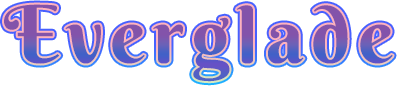
<style>
.page{position:relative;width:397px;height:86px;background:#ffffff}
.page>*{position:absolute;margin:0}
.t1{font:75.9px "BerkshireSwash-Regular";letter-spacing:0.1em}
.t2{font:79.9px "BerkshireSwash-Regular";letter-spacing:0.1em}
</style>
<div class="page">
<p class="t1" style="left:4px;top:4px;width:389px;height:78px"><span class="t2">E</span>verglade</p>
</div>
